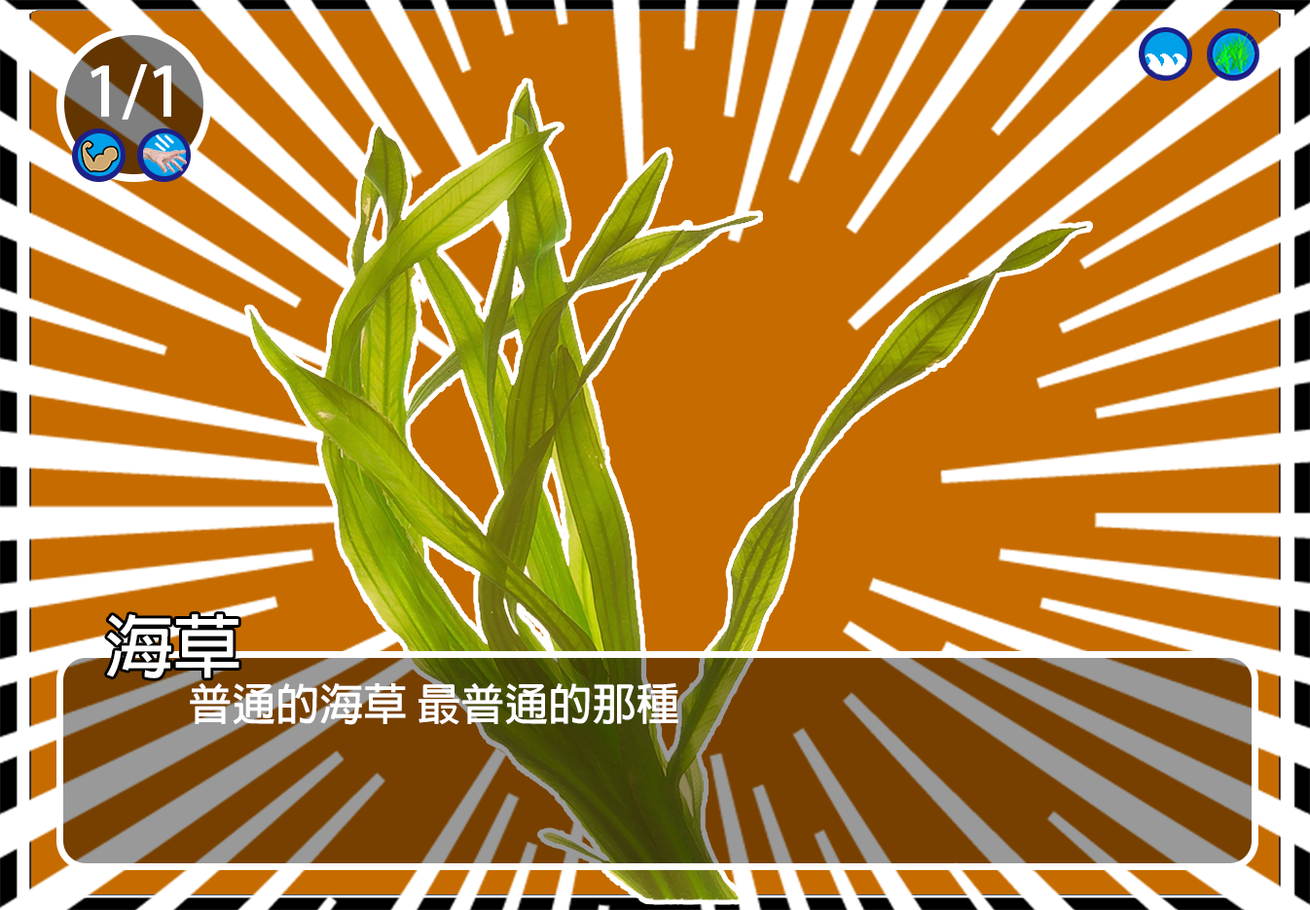
<style>
.page{position:relative;width:1310px;height:910px;background:#c66b00}
.page>*{position:absolute;margin:0}
.t1{font:66.9px "AdobeFanHeitiStd-Bold";color:#ffffff}
.t2{font:68.1px "AdobeFanHeitiStd-Bold";color:#ffffff}
.t3{font:43.8px "AdobeFanHeitiStd-Bold";color:#ffffff}
</style>
<div class="page">
<p class="t1" style="left:91px;top:64px;width:80px;height:56px">1/1</p>
<p class="t2" style="left:107px;top:614px;width:132px;height:64px">海草</p>
<p class="t3" style="left:190px;top:683px;width:488px;height:42px">普通的海草 最普通的那種</p>
</div>
